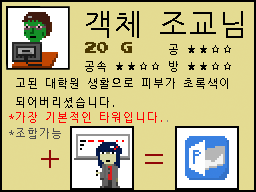
<style>
.page{position:relative;width:256px;height:192px;background:#e4db92}
.page>*{position:absolute;margin:0}
.t1{font:30px "NanumGothicCoding";color:#000000}
.t2{font:12px "PressStart2P";color:#4b3800}
.t3{font:11px "NanumGothicCoding";color:#000000}
.t4{font:11px "NanumGothicCoding";color:#ff0000}
.t5{font:11px "NanumGothicCoding";color:#868581}
.t6{font:11px "NanumGothicCoding";color:#4f4f4f}
.t7{font:36px "NanumGothicCoding";color:#900707}
</style>
<div class="page">
<p class="t1" style="left:86px;top:11px;width:157px;height:27px">객체 조교님</p>
<p class="t2" style="left:85px;top:42px;width:47px;height:11px">20 G</p>
<p class="t3" style="left:169px;top:44px;width:62px;height:11px">공 ★★☆☆</p>
<p class="t3" style="left:85px;top:61px;width:146px;height:11px">공속 ★★☆☆ 방 ★★☆☆</p>
<p class="t3" style="left:16px;top:78px;width:212px;height:30px">고된 대학원 생활으로 피부가 초록색이<br>되어버리셨습니다.</p>
<p class="t4" style="left:9px;top:112px;width:159px;height:11px">*가장 기본적인 타워입니다.<span class="t5">.</span></p>
<p class="t6" style="left:9px;top:128px;width:52px;height:11px">*조합가능</p>
<p class="t7" style="left:41px;top:150px;width:18px;height:18px">+</p>
<p class="t7" style="left:145px;top:154px;width:18px;height:10px">=</p>
</div>
